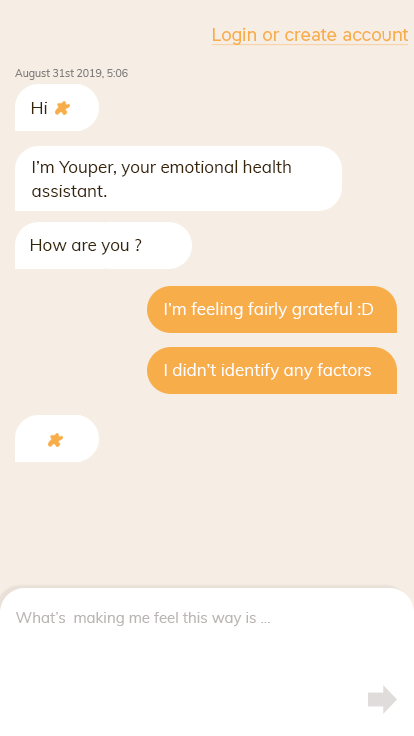
<style>
.page{position:relative;width:414px;height:736px;background:#f6ede4}
.page>*{position:absolute;margin:0}
.t1{font:18px "CoreSansA45Regular";color:#f7ae4a;text-decoration:underline}
.t2{font:10.6px "Muli-Regular";color:#7e7c7c}
.t3{font:17px "Muli-Regular";color:#382407}
.t4{font:17px/24px "Muli-Regular";color:#382407}
.t5{font:17px "Muli-Regular";color:#ffffff}
.t6{font:15px "Muli-Regular";color:#bbb4b4}
</style>
<div class="page">
<p class="t1" style="left:211px;top:27px;width:198px;height:19px">Login or create account</p>
<p class="t2" style="left:15px;top:69px;width:113px;height:11px">August 31st 2019, 5:06</p>
<p class="t3" style="left:31px;top:102px;width:16px;height:12px">Hi</p>
<p class="t4" style="left:32px;top:160px;width:259px;height:37px">I’m Youper, your emotional health <br>assistant.</p>
<p class="t3" style="left:30px;top:239px;width:112px;height:16px">How are you ?</p>
<p class="t5" style="left:164px;top:302px;width:209px;height:17px">I’m feeling fairly grateful :D</p>
<p class="t5" style="left:164px;top:363px;width:207px;height:17px">I didn’t identify any factors</p>
<p class="t6" style="left:15px;top:612px;width:255px;height:15px">What’s  making me feel this way is ...</p>
</div>
